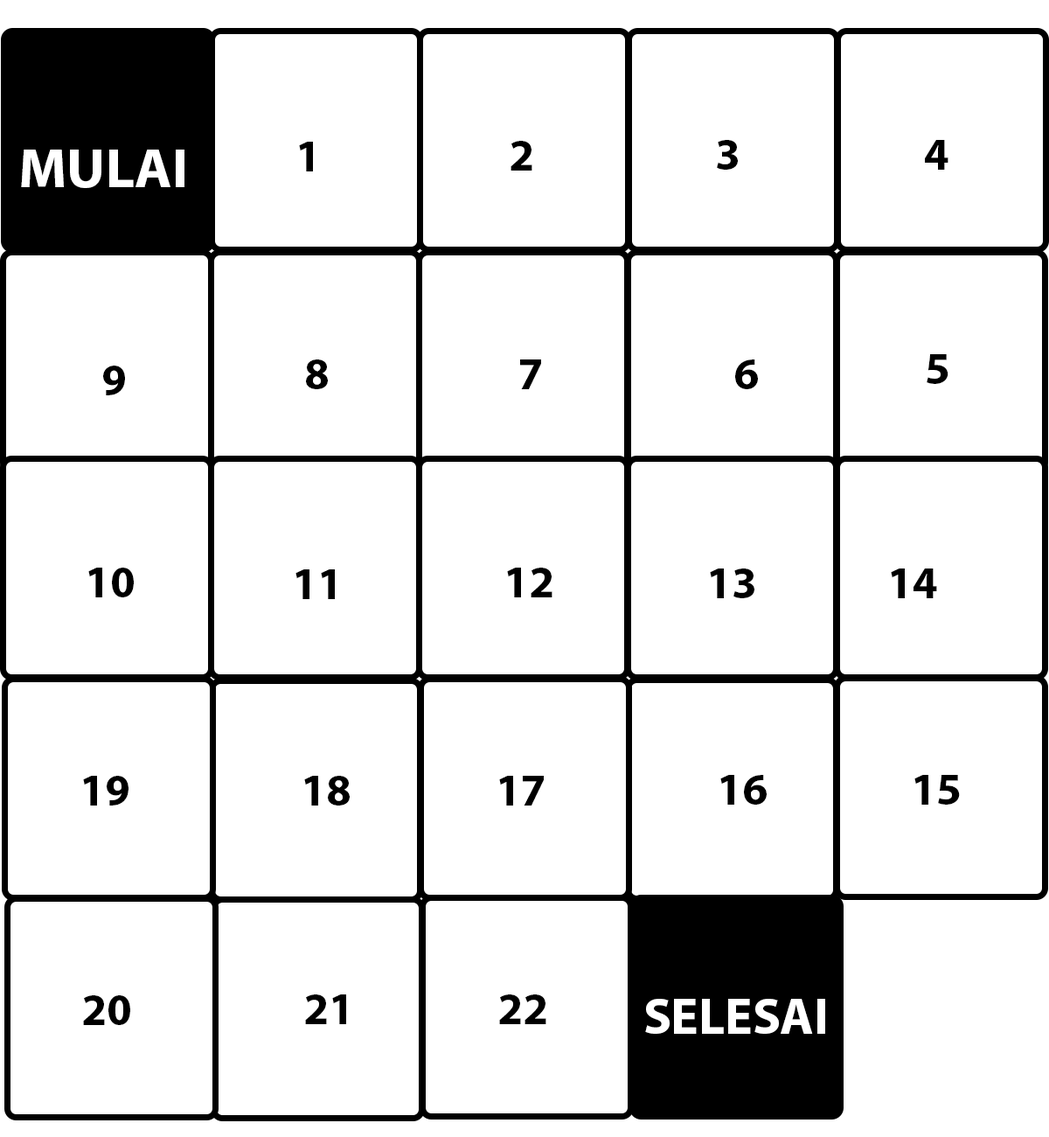
<style>
.page{position:relative;width:1049px;height:1137px;background:#ffffff}
.page>*{position:absolute;margin:0}
.t1{font:55.9px "MyriadPro-Bold";color:#ffffff}
.t2{font:44.8px "MyriadPro-Bold";color:#000000}
.t3{font:50.5px "MyriadPro-Bold";color:#ffffff}
</style>
<div class="page">
<p class="t1" style="left:21px;top:150px;width:163px;height:38px">MULAI</p>
<p class="t2" style="left:299px;top:142px;width:14px;height:29px">1</p>
<p class="t2" style="left:511px;top:141px;width:21px;height:29px">2</p>
<p class="t2" style="left:717px;top:140px;width:21px;height:30px">3</p>
<p class="t2" style="left:925px;top:140px;width:24px;height:30px">4</p>
<p class="t2" style="left:103px;top:365px;width:22px;height:30px">9</p>
<p class="t2" style="left:306px;top:359px;width:22px;height:30px">8</p>
<p class="t2" style="left:520px;top:359px;width:21px;height:30px">7</p>
<p class="t2" style="left:735px;top:359px;width:23px;height:30px">6</p>
<p class="t2" style="left:927px;top:354px;width:22px;height:30px">5</p>
<p class="t2" style="left:88px;top:567px;width:46px;height:30px">10</p>
<p class="t2" style="left:296px;top:569px;width:39px;height:30px">11</p>
<p class="t2" style="left:507px;top:567px;width:46px;height:30px">12</p>
<p class="t2" style="left:710px;top:568px;width:45px;height:30px">13</p>
<p class="t2" style="left:891px;top:568px;width:46px;height:30px">14</p>
<p class="t2" style="left:83px;top:775px;width:46px;height:30px">19</p>
<p class="t2" style="left:304px;top:775px;width:46px;height:30px">18</p>
<p class="t2" style="left:499px;top:775px;width:45px;height:30px">17</p>
<p class="t2" style="left:720px;top:775px;width:47px;height:29px">16</p>
<p class="t2" style="left:915px;top:775px;width:45px;height:29px">15</p>
<p class="t2" style="left:83px;top:995px;width:47px;height:30px">20</p>
<p class="t2" style="left:305px;top:994px;width:41px;height:30px">21</p>
<p class="t2" style="left:499px;top:994px;width:47px;height:30px">22</p>
<p class="t3" style="left:645px;top:998px;width:180px;height:35px">SELESAI</p>
</div>
